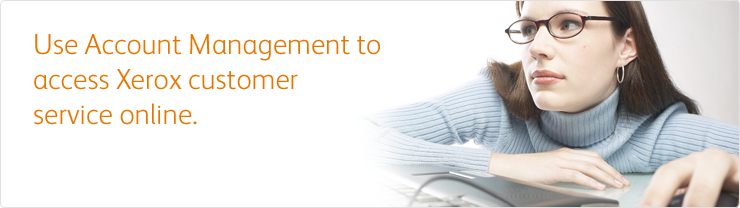
<style>
.page{position:relative;width:740px;height:208px;background:#ffffff}
.page>*{position:absolute;margin:0}
.t1{font:29px "XeroxSans-Light";color:#e67600}
</style>
<div class="page">
<p class="t1" style="left:34px;top:34px;width:346px;height:91px">Use Account Management to <br>access Xerox customer <br>service online.</p>
</div>
